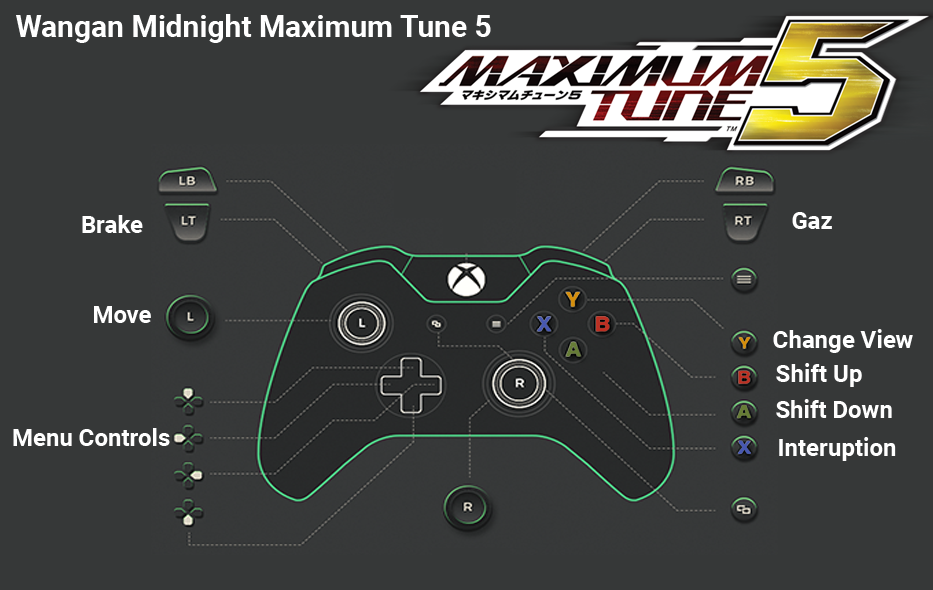
<style>
.page{position:relative;width:933px;height:590px;background:#363838}
.page>*{position:absolute;margin:0}
.t1{font:30px "Roboto-Bold";color:#ffffff}
.t2{font:24px "Roboto-Bold";color:#ffffff}
</style>
<div class="page">
<p class="t1" style="left:16px;top:14px;width:475px;height:29px">Wangan Midnight Maximum Tune 5</p>
<p class="t2" style="left:82px;top:215px;width:61px;height:18px">Brake</p>
<p class="t2" style="left:792px;top:212px;width:40px;height:17px">Gaz</p>
<p class="t2" style="left:94px;top:306px;width:57px;height:17px">Move</p>
<p class="t2" style="left:773px;top:329px;width:140px;height:24px">Change View</p>
<p class="t2" style="left:776px;top:363px;width:86px;height:24px">Shift Up</p>
<p class="t2" style="left:776px;top:399px;width:116px;height:19px">Shift Down</p>
<p class="t2" style="left:13px;top:428px;width:157px;height:18px">Menu Controls</p>
<p class="t2" style="left:779px;top:437px;width:117px;height:24px">Interuption</p>
</div>
